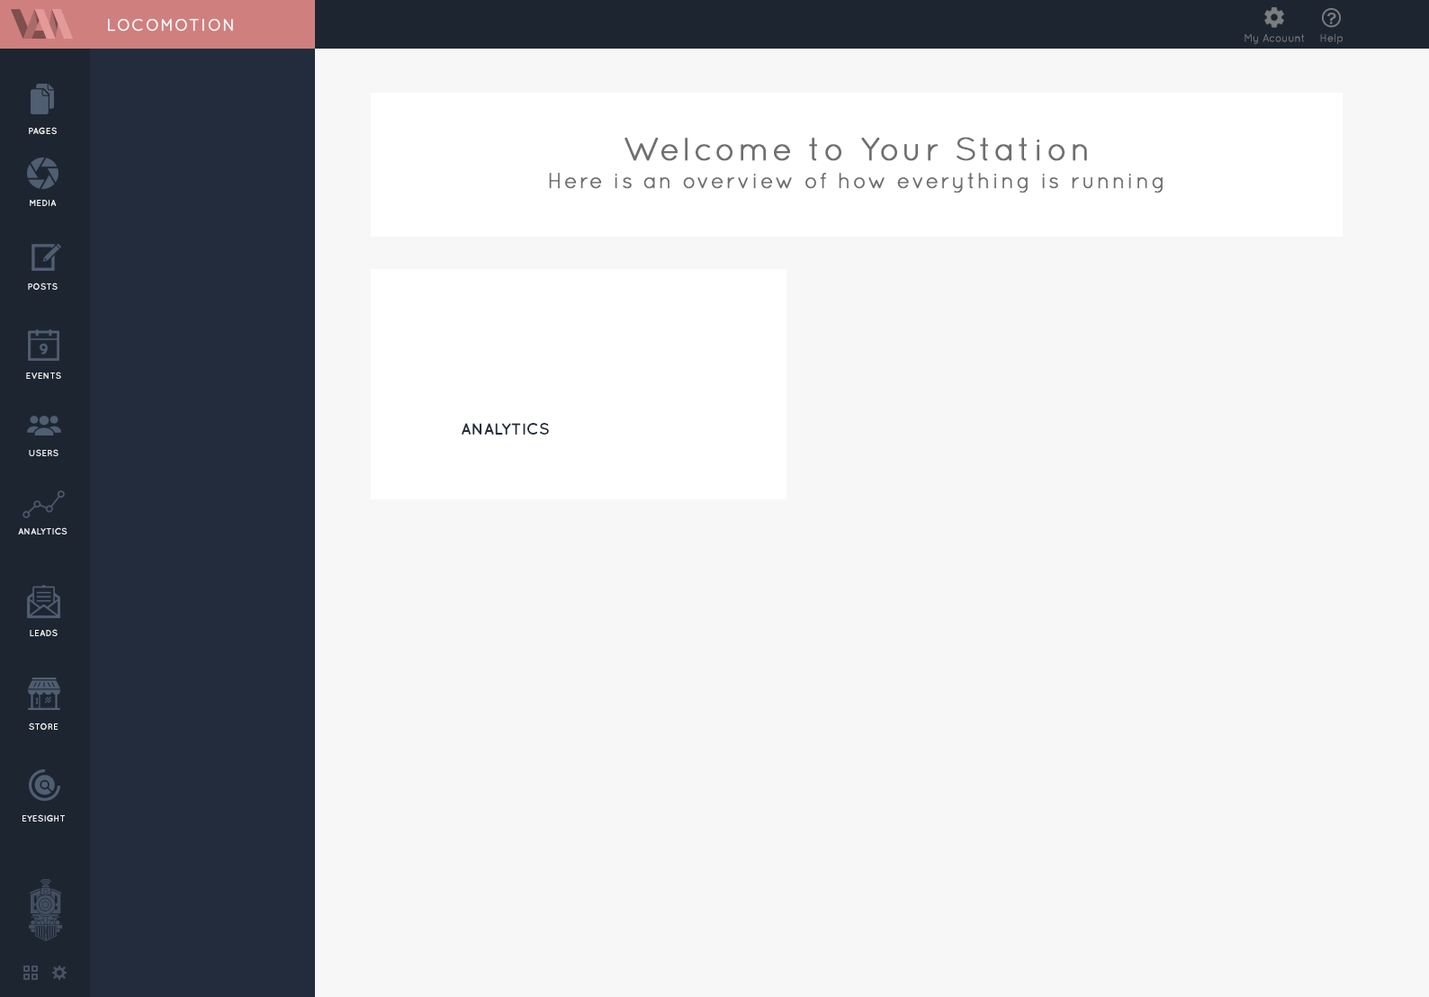
<style>
.page{position:relative;width:1429px;height:997px;background:#f7f7f7}
.page>*{position:absolute;margin:0}
.t1{font:16.2px "Quicksand-Regular";letter-spacing:0.07em;color:#ffffff;font-weight:bold}
.t2{font:10.8px "Quicksand-Regular";color:#797979}
.t3{font:9px "Quicksand-Bold";color:#f7f7f7;text-transform:uppercase}
.t4{font:32.4px "Quicksand-Regular";letter-spacing:0.07em;color:#6f6f6f;font-weight:bold}
.t5{font:21.6px "Quicksand-Regular";letter-spacing:0.07em;color:#6f6f6f;font-weight:bold}
.t6{font:16.2px "Quicksand-Bold";color:#222c3c;text-transform:uppercase}
</style>
<div class="page">
<p class="t1" style="left:108px;top:19px;width:125px;height:13px">LOCOMOTION</p>
<p class="t2" style="left:1245px;top:33px;width:59px;height:11px">My Acouunt</p>
<p class="t2" style="left:1320px;top:33px;width:23px;height:11px">Help</p>
<p class="t3" style="left:29px;top:127px;width:28px;height:7px">PAGES</p>
<p class="t4" style="left:625px;top:137px;width:462px;height:24px">Welcome to Your Station</p>
<p class="t5" style="left:549px;top:173px;width:614px;height:20px">Here is an overview of how everything is running</p>
<p class="t3" style="left:30px;top:200px;width:27px;height:6px">MEDIA</p>
<p class="t3" style="left:28px;top:283px;width:30px;height:7px">POSTS</p>
<p class="t3" style="left:26px;top:372px;width:35px;height:7px">EVENTS</p>
<p class="t6" style="left:462px;top:423px;width:87px;height:12px">ANALYTICS</p>
<p class="t3" style="left:29px;top:449px;width:29px;height:7px">USERS</p>
<p class="t3" style="left:18px;top:527px;width:50px;height:8px">ANALYTICS</p>
<p class="t3" style="left:30px;top:629px;width:28px;height:7px">LEADS</p>
<p class="t3" style="left:29px;top:723px;width:29px;height:7px">STORE</p>
<p class="t3" style="left:22px;top:814px;width:43px;height:8px">EYESIGHT</p>
</div>
